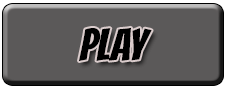
<style>
.page{position:relative;width:227px;height:90px;background:#5b5959}
.page>*{position:absolute;margin:0}
.t1{font:44.8px "Bangers-Regular";color:#000000}
</style>
<div class="page">
<p class="t1" style="left:79px;top:27px;width:73px;height:34px">PLAY</p>
</div>
